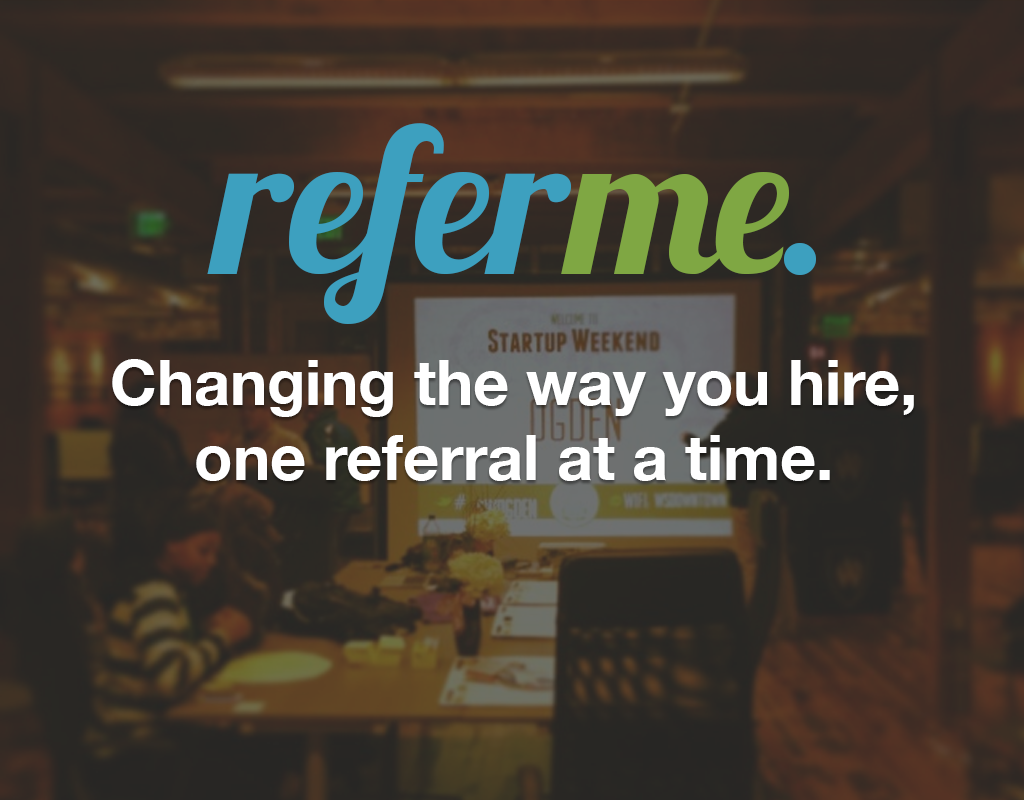
<style>
.page{position:relative;width:1024px;height:800px}
.page>*{position:absolute;margin:0}
.t1{font:200.9px "Lobster1.3";color:#3da0bf}
.t2{font:200.9px "Lobster1.3";color:#7fa743}
.t3{font:200.9px "Lobster1.3";letter-spacing:-0.075em;color:#7fa743}
.t4{font:200.9px "Lobster1.3";letter-spacing:-0.075em;color:#3da0bf}
.t5{font:62.5px "HelveticaNeue-Bold";color:#ffffff}
</style>
<div class="page">
<p class="t1" style="left:207px;top:123px;width:609px;height:201px">refer<span class="t2">m</span><span class="t3">e</span><span class="t4">.</span></p>
<p class="t5" style="left:112px;top:359px;width:802px;height:122px;text-align:center">Changing the way you hire,<br>one referral at a time.</p>
</div>
